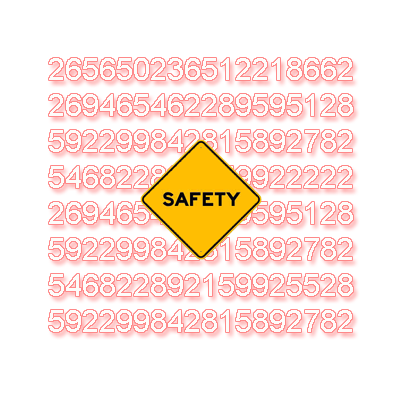
<style>
.page{position:relative;width:400px;height:400px;background:#ffffff}
.page>*{position:absolute;margin:0}
.t1{font:30px "ArialMT";color:#fbfaf7}
</style>
<div class="page">
<p class="t1" style="left:49px;top:58px;width:304px;height:274px;opacity:0.62">265650236512218662<br>269465462289595128<br>592299842815892782<br>546822892159922222<br>269465462289595128<br>592299842815892782<br>546822892159925528<br>592299842815892782</p>
</div>
